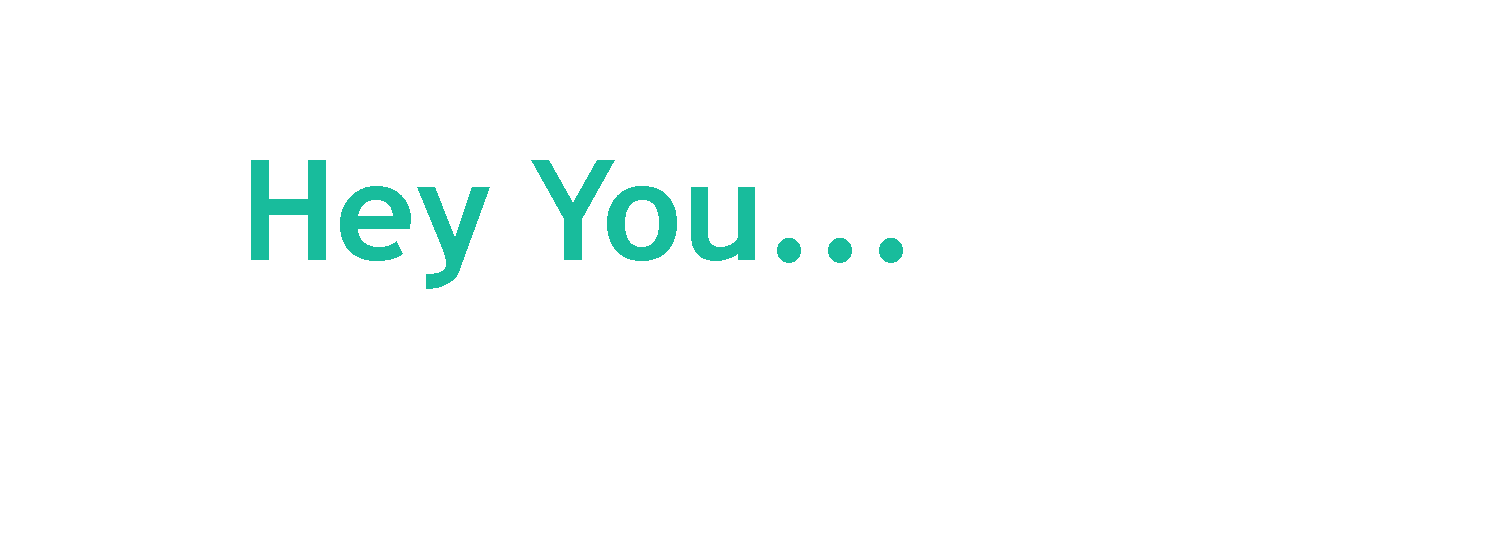
<style>
.page{position:relative;width:1500px;height:550px;background:#ffffff}
.page>*{position:absolute;margin:0}
.t1{font:140px "TrebuchetMS-Bold";color:#18bc9c}
</style>
<div class="page">
<p class="t1" style="left:251px;top:160px;width:652px;height:129px">Hey You...</p>
</div>
